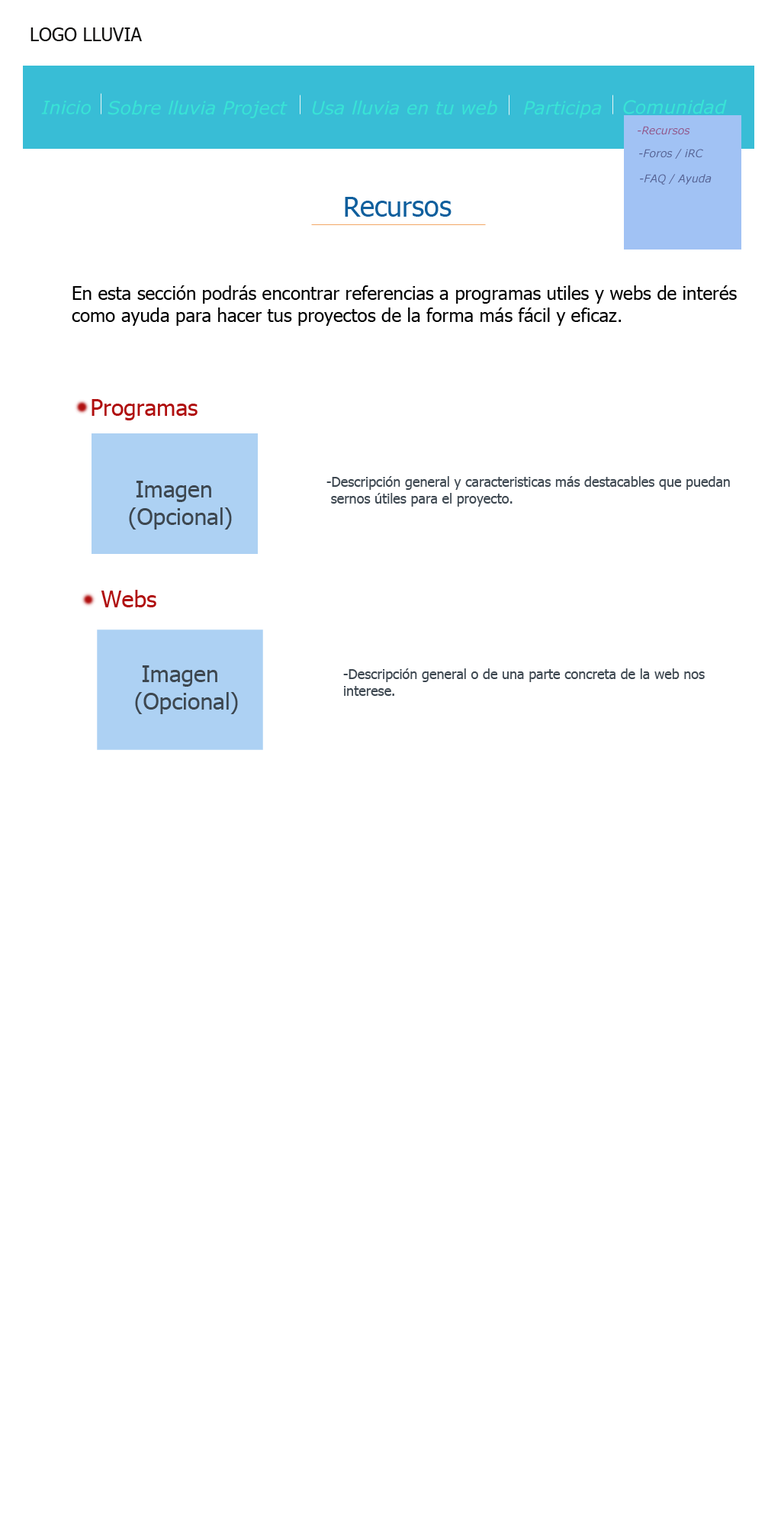
<style>
.page{position:relative;width:781px;height:1526px;background:#ffffff}
.page>*{position:absolute;margin:0}
.t1{font:18.3px "Tahoma";color:#121110}
.t2{font:18.3px "Verdana-Italic";color:#38e3d6}
.t3{font:10.7px "Verdana-Italic";color:#915689}
.t4{font:10.7px "Verdana-Italic";color:#556293}
.t5{font:27.5px "Tahoma";color:#0f5f9d}
.t6{font:18.3px "Tahoma";color:#000000}
.t7{font:22.9px "Tahoma";color:#b00f0f}
.t8{font:22.9px "Tahoma";color:#3d4750}
.t9{font:13.7px "Tahoma";color:#3d4750}
</style>
<div class="page">
<p class="t1" style="left:31px;top:27px;width:111px;height:14px">LOGO LLUVIA</p>
<p class="t2" style="left:41px;top:101px;width:50px;height:13px">Inicio</p>
<p class="t2" style="left:108px;top:100px;width:180px;height:18px">Sobre lluvia Project</p>
<p class="t2" style="left:312px;top:100px;width:186px;height:15px">Usa lluvia en tu web</p>
<p class="t2" style="left:523px;top:101px;width:79px;height:17px">Participa</p>
<p class="t2" style="left:623px;top:99px;width:104px;height:15px">Comunidad</p>
<p class="t3" style="left:638px;top:126px;width:53px;height:9px">-Recursos</p>
<p class="t4" style="left:639px;top:149px;width:65px;height:10px">-Foros / iRC</p>
<p class="t4" style="left:640px;top:174px;width:72px;height:11px">-FAQ / Ayuda</p>
<p class="t5" style="left:345px;top:197px;width:107px;height:20px">Recursos</p>
<p class="t6" style="left:72px;top:285px;width:665px;height:41px">En esta sección podrás encontrar referencias a programas utiles y webs de interés<br>como ayuda para hacer tus proyectos de la forma más fácil y eficaz.</p>
<p class="t7" style="left:92px;top:399px;width:106px;height:21px">Programas</p>
<p class="t8" style="left:129px;top:481px;width:103px;height:49px">Imagen<br>(Opcional)</p>
<p class="t9" style="left:327px;top:476px;width:403px;height:31px">-Descripción general y caracteristicas más destacables que puedan<br> sernos útiles para el proyecto.</p>
<p class="t7" style="left:101px;top:590px;width:55px;height:17px">Webs</p>
<p class="t8" style="left:135px;top:665px;width:103px;height:49px">Imagen<br>(Opcional)</p>
<p class="t9" style="left:343px;top:668px;width:362px;height:28px">-Descripción general o de una parte concreta de la web nos <br>interese.</p>
</div>
